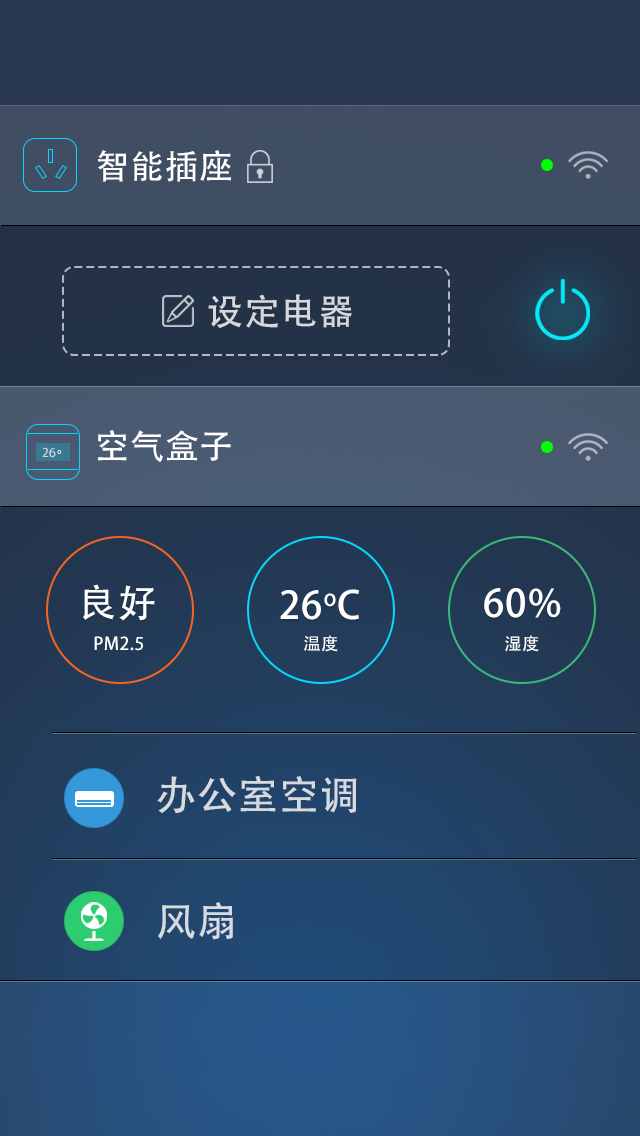
<style>
.page{position:relative;width:640px;height:1136px}
.page>*{position:absolute;margin:0}
.t1{font:34px "AdobeHeitiStd-Regular";letter-spacing:0.025em;color:#ffffff}
.t2{font:36px "AdobeHeitiStd-Regular";letter-spacing:0.025em;color:#d7d8db}
.t3{font:12px "AdobeHeitiStd-Regular";letter-spacing:0.025em;color:#c9d6dd}
.t4{font:12px "AdobeHeitiStd-Regular";letter-spacing:0.025em}
.t5{font:38px "AdobeHeitiStd-Regular";letter-spacing:0.025em;color:#ffffff}
.t6{font:30px "AdobeHeitiStd-Regular";letter-spacing:0.025em;color:#ffffff}
.t7{font:40px "AdobeHeitiStd-Regular";letter-spacing:0.025em;color:#d6dae0}
.t8{font:40px "AdobeHeitiStd-Regular";letter-spacing:0.025em;color:#d6dbe1}
</style>
<div class="page">
<p class="t1" style="left:98px;top:150px;width:133px;height:32px">智能插座</p>
<p class="t2" style="left:208px;top:294px;width:144px;height:34px">设定电器</p>
<p class="t1" style="left:98px;top:430px;width:133px;height:32px">空气盒子</p>
<p class="t3" style="left:42px;top:447px;width:14px;height:11px">26</p>
<p class="t4" style="left:57px;top:450px;width:4px;height:4px">o</p>
<p class="t5" style="left:83px;top:584px;width:72px;height:37px">良好</p>
<p class="t5" style="left:280px;top:589px;width:79px;height:31px">26oC</p>
<p class="t5" style="left:484px;top:588px;width:77px;height:30px">60%</p>
<p class="t6" style="left:94px;top:636px;width:49px;height:15px">PM2.5</p>
<p class="t6" style="left:304px;top:635px;width:34px;height:17px">温度</p>
<p class="t6" style="left:505px;top:635px;width:34px;height:17px">湿度</p>
<p class="t7" style="left:157px;top:776px;width:200px;height:38px">办公室空调</p>
<p class="t8" style="left:158px;top:902px;width:75px;height:38px">风扇</p>
</div>
